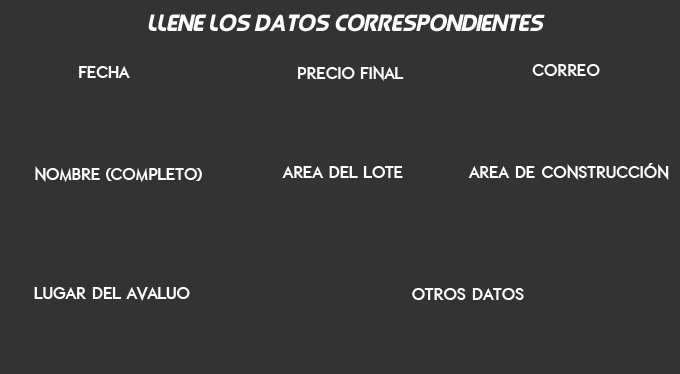
<style>
.page{position:relative;width:680px;height:374px;background:#333333}
.page>*{position:absolute;margin:0}
.t1{font:24px "QueenofCamelot-Italic";color:#ffffff}
.t2{font:18.7px "ETH-Black";color:#ffffff}
</style>
<div class="page">
<p class="t1" style="left:148px;top:14px;width:397px;height:18px">Llene los datos correspondientes</p>
<p class="t2" style="left:298px;top:65px;width:106px;height:16px">Precio final</p>
<p class="t2" style="left:532px;top:64px;width:68px;height:12px">Correo</p>
<p class="t2" style="left:79px;top:66px;width:51px;height:12px">Fecha</p>
<p class="t2" style="left:35px;top:166px;width:167px;height:16px">Nombre (completo)</p>
<p class="t2" style="left:282px;top:166px;width:121px;height:12px">Area del lote</p>
<p class="t2" style="left:468px;top:163px;width:201px;height:17px">Area de construcción</p>
<p class="t2" style="left:34px;top:287px;width:156px;height:14px">lugar del avaluo</p>
<p class="t2" style="left:412px;top:288px;width:112px;height:12px">Otros Datos</p>
</div>
